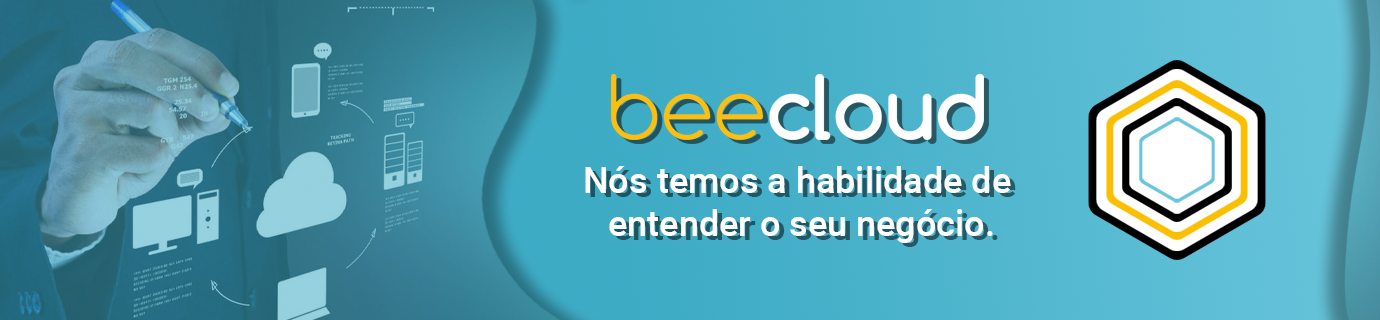
<style>
.page{position:relative;width:1380px;height:320px}
.page>*{position:absolute;margin:0}
.t1{font:36px "Roboto-Medium";color:#ffffff}
</style>
<div class="page">
<p class="t1" style="left:585px;top:166px;width:426px;height:77px;text-align:center">Nós temos a habilidade de <br>entender o seu negócio.</p>
</div>
